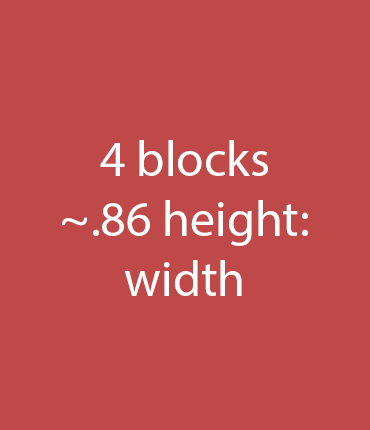
<style>
.page{position:relative;width:370px;height:430px;background:#bf4848}
.page>*{position:absolute;margin:0}
.t1{font:12px "MyriadPro-Regular";color:#ffffff}
</style>
<div class="page">
<p class="t1" style="left:62px;top:140px;width:246px;height:156px;text-align:center">4 blocks<br>~.86 height:<br>width</p>
</div>
